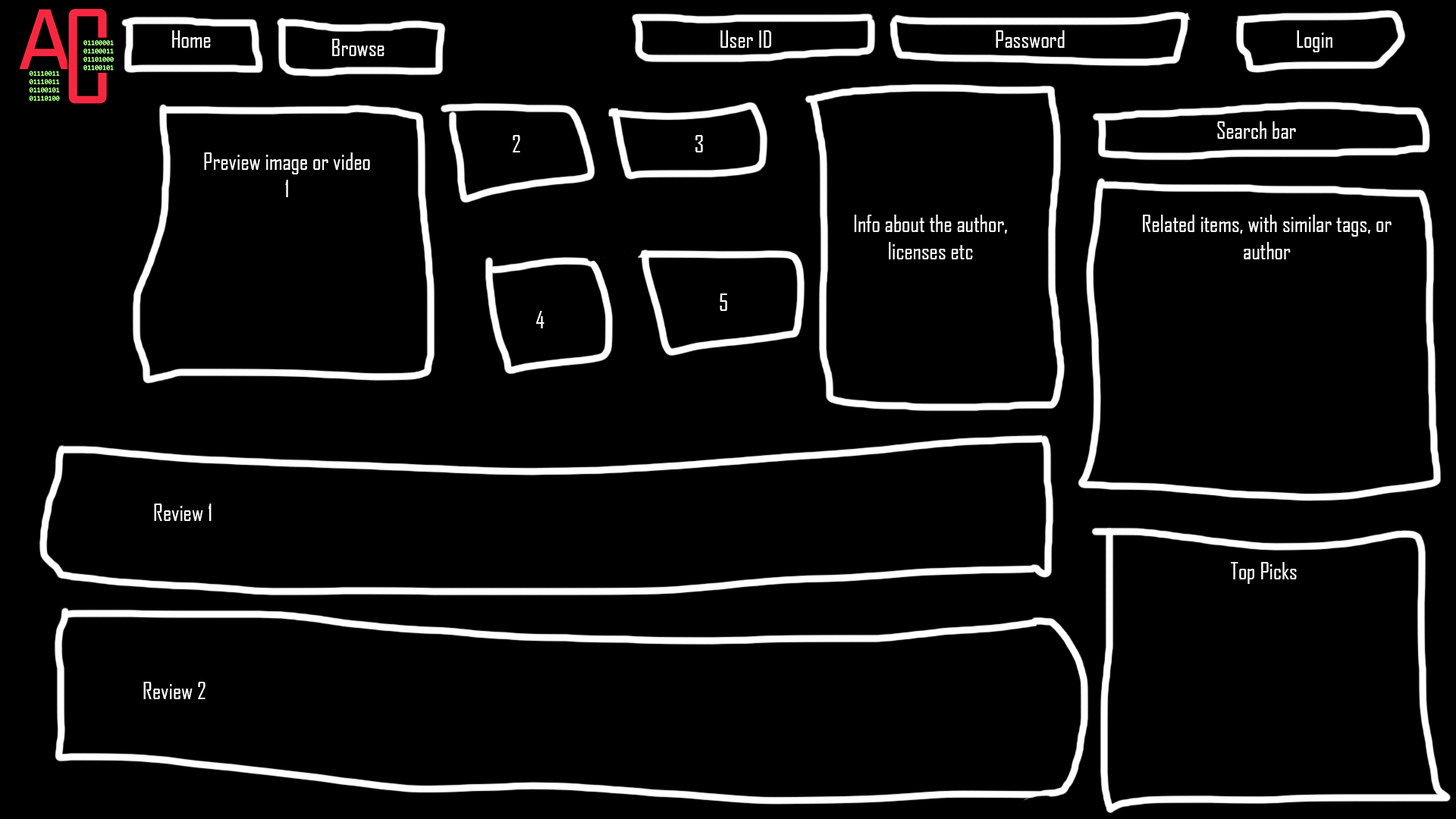
<style>
.page{position:relative;width:1456px;height:819px;background:#000000}
.page>*{position:absolute;margin:0}
.t1{font:22.7px "AgencyFB-Reg";color:#ffffff}
</style>
<div class="page">
<p class="t1" style="left:172px;top:30px;width:39px;height:18px">Home</p>
<p class="t1" style="left:332px;top:39px;width:52px;height:17px">Browse</p>
<p class="t1" style="left:720px;top:30px;width:51px;height:18px">User ID</p>
<p class="t1" style="left:996px;top:30px;width:69px;height:18px">Password</p>
<p class="t1" style="left:1297px;top:30px;width:35px;height:22px">Login</p>
<p class="t1" style="left:1217px;top:121px;width:79px;height:18px">Search bar</p>
<p class="t1" style="left:513px;top:135px;width:7px;height:17px">2</p>
<p class="t1" style="left:695px;top:135px;width:8px;height:17px">3</p>
<p class="t1" style="left:204px;top:152px;width:166px;height:45px;text-align:center">Preview image or video<br>1</p>
<p class="t1" style="left:854px;top:215px;width:153px;height:44px;text-align:center">Info about the author, licenses etc</p>
<p class="t1" style="left:1143px;top:215px;width:249px;height:44px;text-align:center">Related items, with similar tags, or author</p>
<p class="t1" style="left:720px;top:293px;width:7px;height:18px">5</p>
<p class="t1" style="left:536px;top:311px;width:8px;height:17px">4</p>
<p class="t1" style="left:154px;top:504px;width:58px;height:17px">Review 1</p>
<p class="t1" style="left:1231px;top:562px;width:66px;height:22px">Top Picks</p>
<p class="t1" style="left:143px;top:682px;width:63px;height:17px">Review 2</p>
</div>
